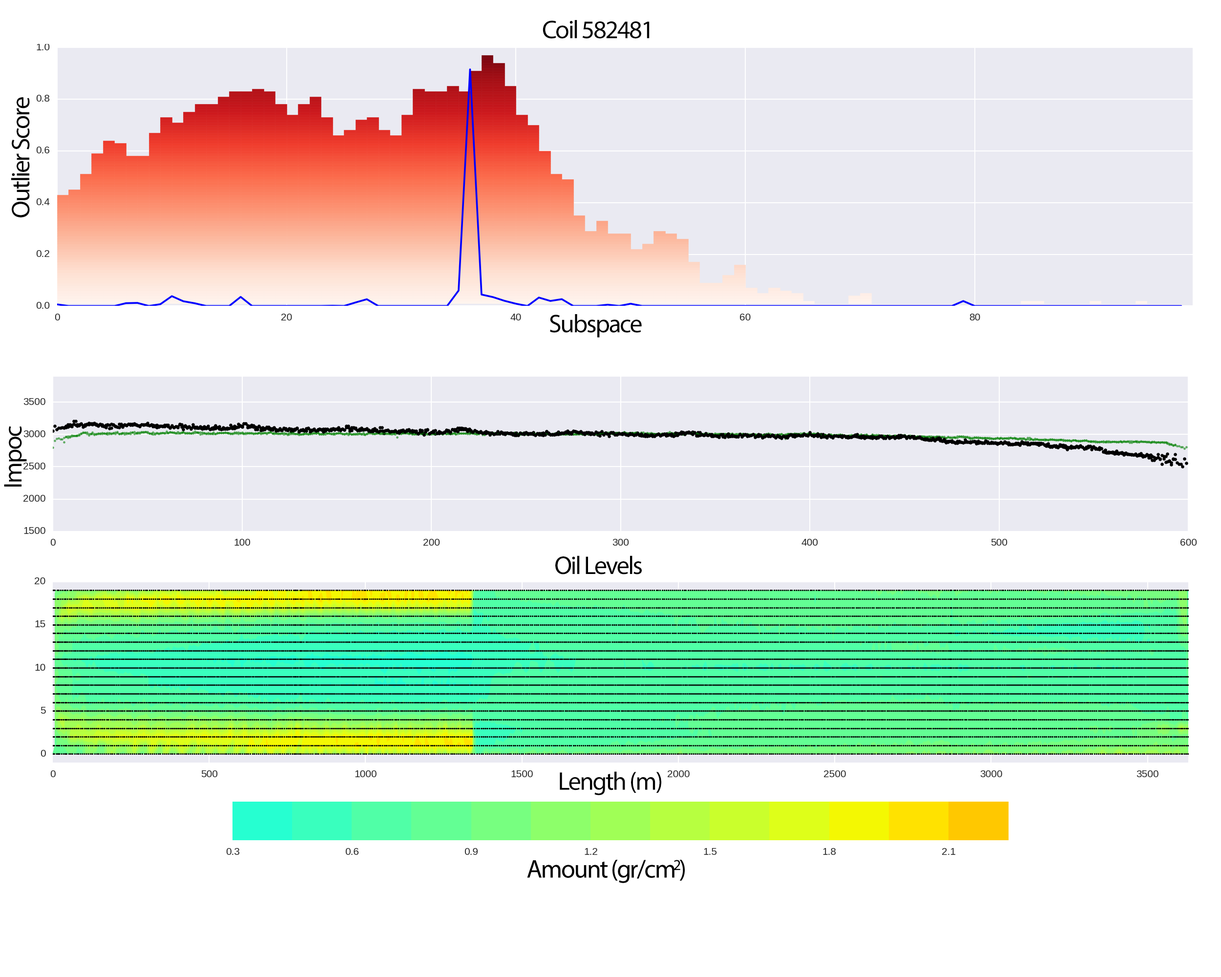
<style>
.page{position:relative;width:1221px;height:977px;background:#ffffff}
.page>*{position:absolute;margin:0}
.t1{font:25.6px "MyriadPro-Regular";letter-spacing:-0.05em;color:#000000}
</style>
<div class="page">
<p class="t1" style="left:543px;top:20px;width:107px;height:19px">Coil 582481</p>
<p class="t1" style="left:11px;top:97px;width:19px;height:120px;rotate:-90deg">Outlier Score</p>
<p class="t1" style="left:550px;top:314px;width:92px;height:23px">Subspace</p>
<p class="t1" style="left:4px;top:426px;width:23px;height:60px;rotate:-90deg">Impoc</p>
<p class="t1" style="left:555px;top:555px;width:87px;height:19px">Oil Levels</p>
<p class="t1" style="left:560px;top:771px;width:101px;height:24px">Length (m)</p>
</div>
